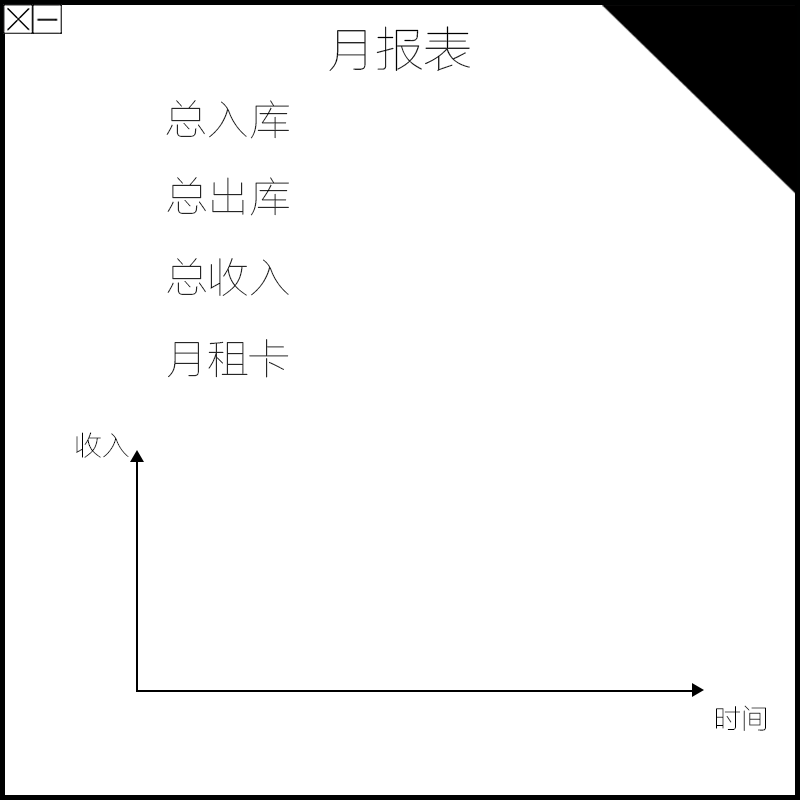
<style>
.page{position:relative;width:800px;height:800px;background:#ffffff}
.page>*{position:absolute;margin:0}
.t1{font:48.7px "FZLTCXHJW--GB1-0";color:#000000}
.t2{font:41.7px "FZLTCXHJW--GB1-0";color:#000000}
.t3{font:41.7px "FZLTCXHJW--GB1-0"}
.t4{font:27.8px "FZLTCXHJW--GB1-0";color:#000000}
</style>
<div class="page">
<p class="t1" style="left:329px;top:26px;width:141px;height:45px">月报表</p>
<p class="t2" style="left:166px;top:100px;width:123px;height:39px">总入库</p>
<p class="t2" style="left:167px;top:177px;width:122px;height:39px">总出库</p>
<p class="t2" style="left:167px;top:258px;width:122px;height:38px">总收入</p>
<p class="t3" style="left:168px;top:339px;width:121px;height:39px">月租卡</p>
<p class="t4" style="left:76px;top:432px;width:53px;height:26px">收入</p>
<p class="t4" style="left:716px;top:705px;width:50px;height:26px">时间</p>
</div>
